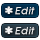
<style>
.page{position:relative;width:40px;height:40px;background:#ffffff}
.page>*{position:absolute;margin:0}
.t1{font:23px "SFOldRepublic";color:#f9f9f9;font-weight:bold}
.t2{font:11px "SFOldRepublic";color:#ececec;font-style:italic}
</style>
<div class="page">
<p class="t1" style="left:5px;top:6px;width:8px;height:8px">*</p>
<p class="t2" style="left:15px;top:7px;width:20px;height:8px">Edit</p>
<p class="t1" style="left:5px;top:26px;width:8px;height:8px">*</p>
<p class="t2" style="left:15px;top:27px;width:20px;height:8px">Edit</p>
</div>
